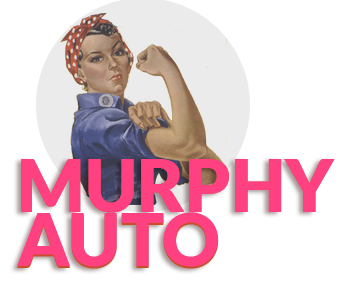
<style>
.page{position:relative;width:360px;height:281px;background:#ffffff}
.page>*{position:absolute;margin:0}
.t1{font:72px "Lato-Black";color:#ff4081}
</style>
<div class="page">
<p class="t1" style="left:21px;top:159px;width:314px;height:54px">MURPHY</p>
<p class="t1" style="left:17px;top:212px;width:202px;height:55px">AUTO</p>
</div>
